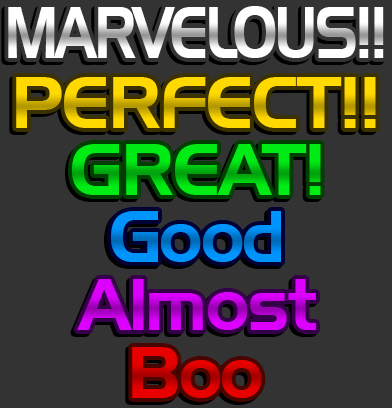
<style>
.page{position:relative;width:392px;height:408px;background:#333333}
.page>*{position:absolute;margin:0}
.t1{font:71px "HandelGothicBT-Regular";letter-spacing:-0.05em;color:#ffffff;scale:0.8 1}
.t2{font:71px "HandelGothicBT-Regular";letter-spacing:-0.025em}
</style>
<div class="page">
<p class="t1" style="left:8px;top:6px;width:376px;height:52px">MARVELOUS!!</p>
<p class="t2" style="left:16px;top:77px;width:360px;height:51px">PERFECT!!</p>
<p class="t2" style="left:72px;top:144px;width:249px;height:51px">GREAT!</p>
<p class="t2" style="left:111px;top:211px;width:170px;height:51px">Good</p>
<p class="t2" style="left:77px;top:279px;width:239px;height:51px">Almost</p>
<p class="t2" style="left:132px;top:347px;width:130px;height:51px">Boo</p>
</div>
